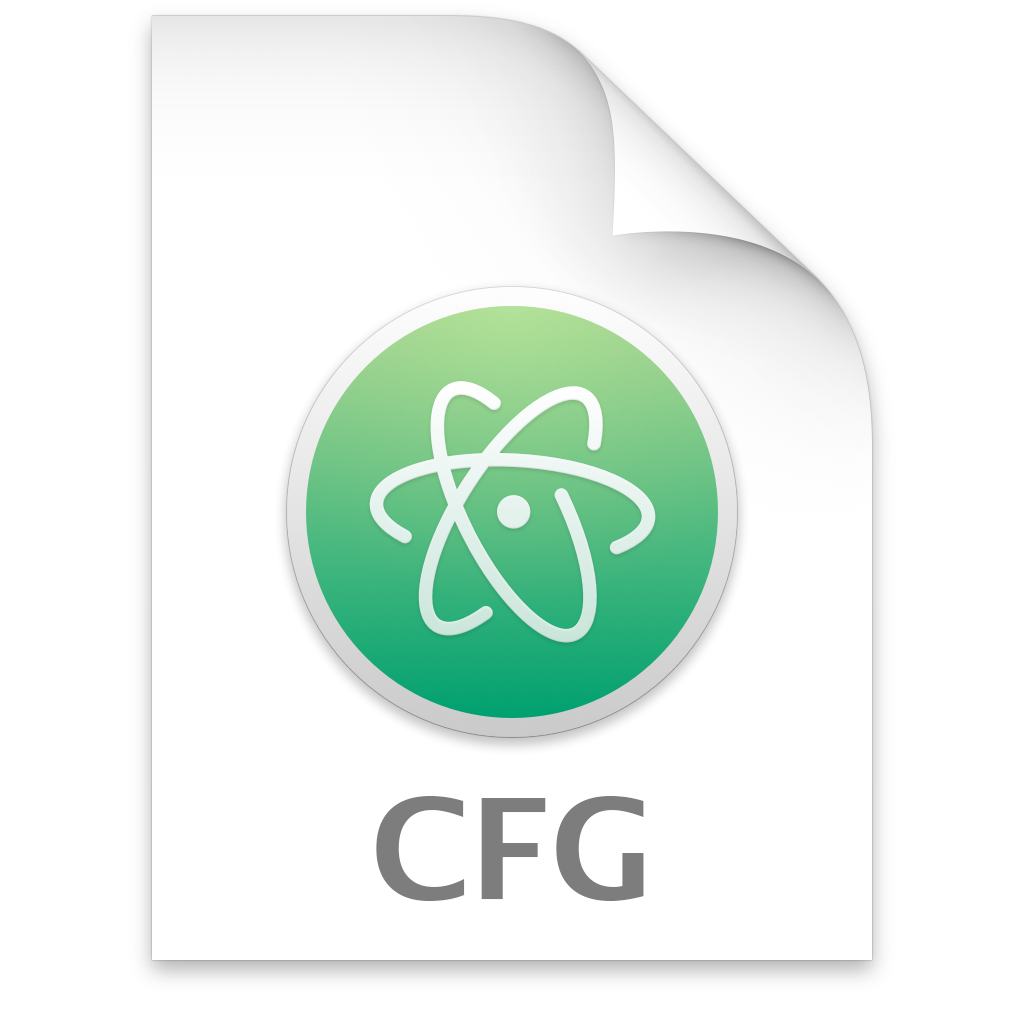
<style>
.page{position:relative;width:1024px;height:1024px;background:#ffffff}
.page>*{position:absolute;margin:0}
.t1{font:140px "LucidaGrande-Bold";color:#7d7d7d}
</style>
<div class="page">
<p class="t1" style="left:376px;top:796px;width:268px;height:105px">CFG</p>
</div>
